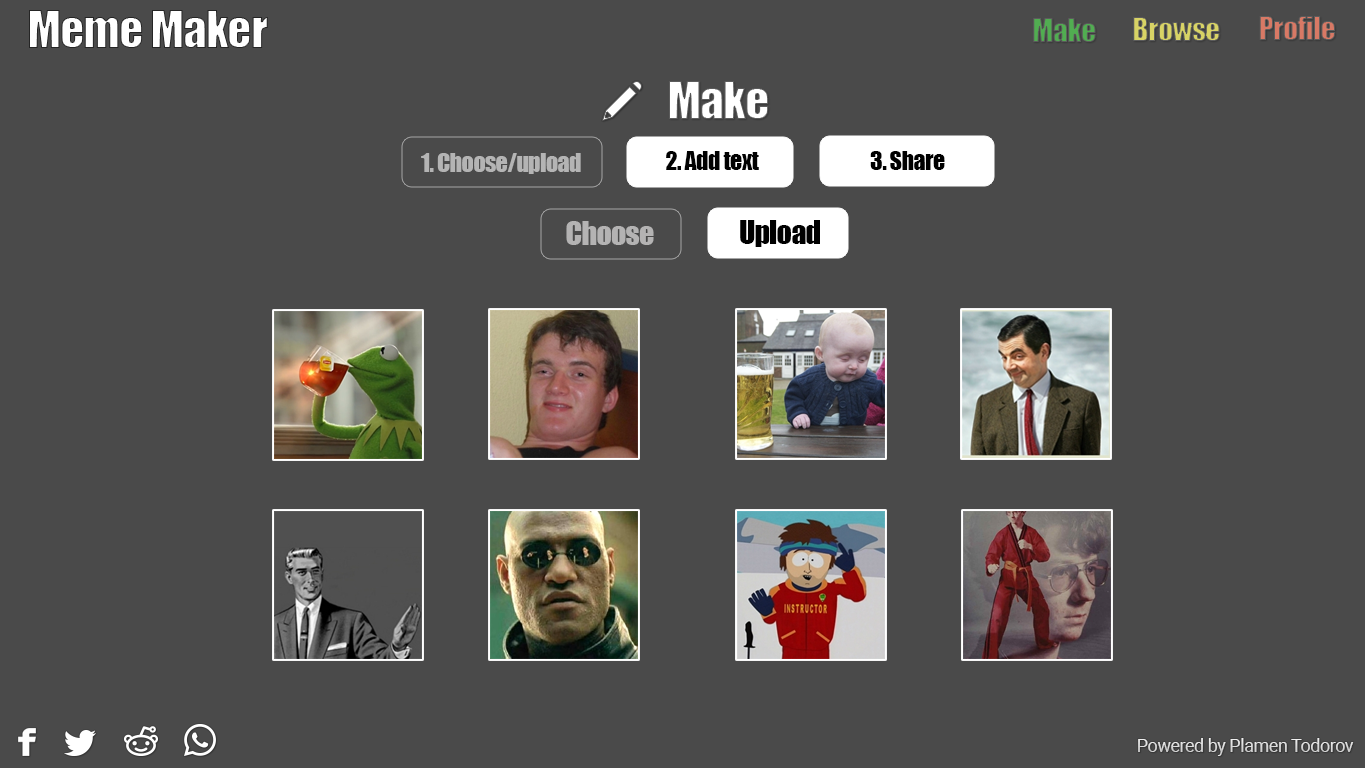
<style>
.page{position:relative;width:1366px;height:768px;background:#4a4a4a}
.page>*{position:absolute;margin:0}
.t1{font:48px "Impact";letter-spacing:-0.025em;color:#ffffff}
.t2{font:30px "Impact";letter-spacing:-0.025em}
.t3{font:24.5px "Impact";letter-spacing:-0.025em;color:#b4b4b4}
.t4{font:24.5px "Impact";letter-spacing:-0.025em;color:#010101}
.t5{font:24.5px "Impact";letter-spacing:-0.025em;color:#000000}
.t6{font:30px "Impact";letter-spacing:-0.025em;color:#b4b3b3}
.t7{font:30px "Impact";letter-spacing:-0.025em;color:#000000}
.t8{font:18px "Roboto-Regular";letter-spacing:-0.025em;color:#dddddd}
</style>
<div class="page">
<p class="t1" style="left:29px;top:10px;width:239px;height:38px">Meme Maker</p>
<p class="t2" style="left:1133px;top:17px;width:87px;height:24px">Browse</p>
<p class="t2" style="left:1259px;top:16px;width:76px;height:24px">Profile</p>
<p class="t2" style="left:1033px;top:18px;width:63px;height:24px">Make</p>
<p class="t1" style="left:669px;top:81px;width:100px;height:38px">Make</p>
<p class="t3" style="left:421px;top:153px;width:160px;height:21px">1. Choose/upload</p>
<p class="t4" style="left:666px;top:151px;width:93px;height:19px">2. Add text</p>
<p class="t5" style="left:870px;top:151px;width:75px;height:19px">3. Share</p>
<p class="t6" style="left:566px;top:221px;width:88px;height:24px">Choose</p>
<p class="t7" style="left:740px;top:220px;width:80px;height:27px">Upload</p>
<p class="t8" style="left:1138px;top:738px;width:216px;height:18px">Powered by Plamen Todorov</p>
</div>
